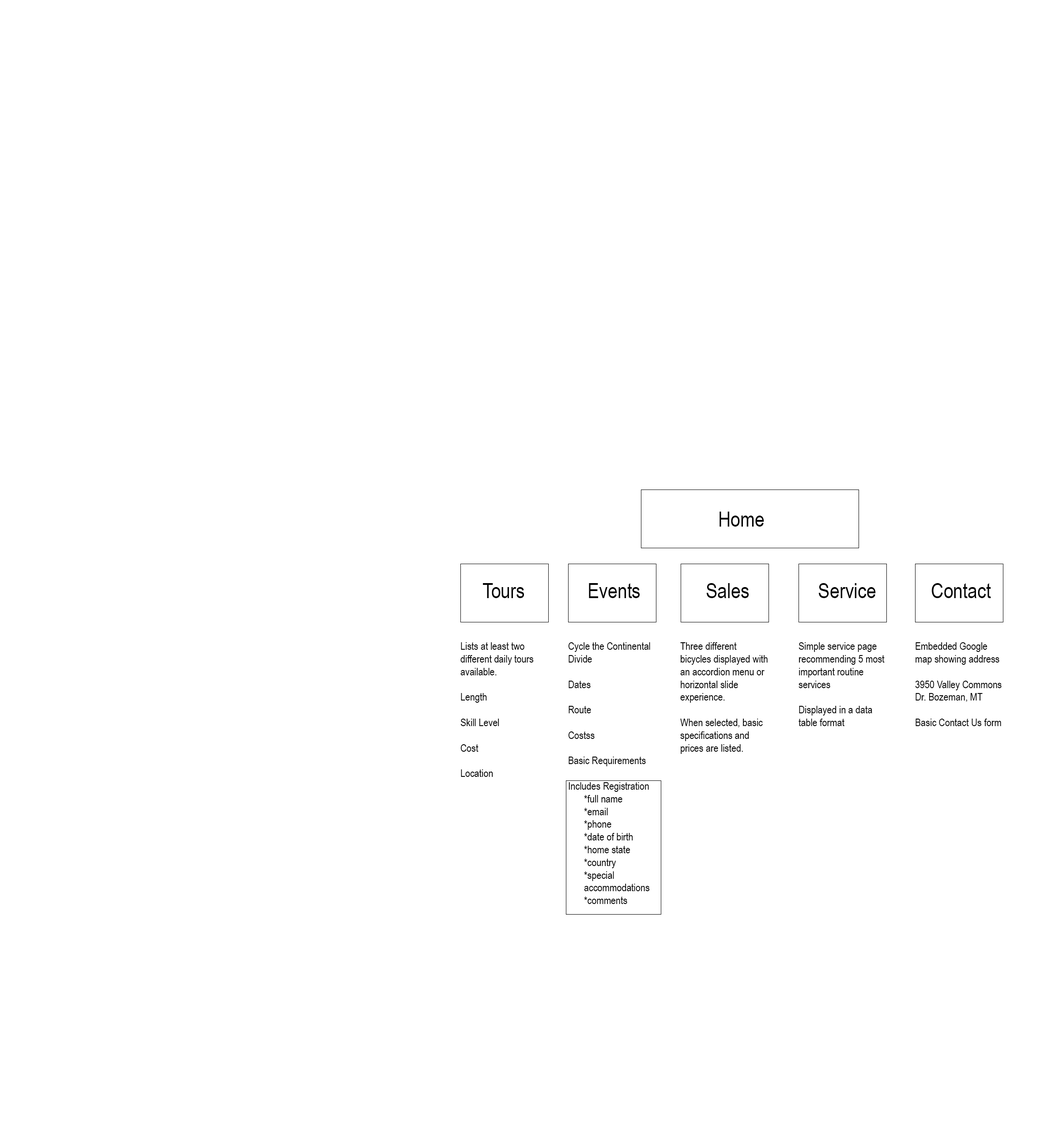
<style>
.page{position:relative;width:1055px;height:1130px;background:#ffffff}
.page>*{position:absolute;margin:0}
.t1{font:21.2px "ArialNarrow";color:#000000}
.t2{font:10.6px "ArialNarrow";color:#000000}
</style>
<div class="page">
<p class="t1" style="left:720px;top:512px;width:44px;height:15px">Home</p>
<p class="t1" style="left:483px;top:583px;width:41px;height:15px">Tours</p>
<p class="t1" style="left:589px;top:583px;width:51px;height:15px">Events</p>
<p class="t1" style="left:706px;top:583px;width:43px;height:15px">Sales</p>
<p class="t1" style="left:818px;top:583px;width:58px;height:15px">Service</p>
<p class="t1" style="left:931px;top:583px;width:60px;height:15px">Contact</p>
<p class="t2" style="left:460px;top:642px;width:74px;height:135px">Lists at least two different daily tours available.<br><br>Length<br><br>Skill Level<br><br>Cost<br><br>Location</p>
<p class="t2" style="left:568px;top:642px;width:82px;height:262px">Cycle the Continental Divide<br><br>Dates<br><br>Route<br><br>Costss<br><br>Basic Requirements<br><br>Includes Registration<br> *full name<br> *email<br> *phone<br> *date of birth<br> *home state<br> *country<br> *special<br> accommodations<br> *comments</p>
<p class="t2" style="left:680px;top:642px;width:88px;height:112px">Three different bicycles displayed with an accordion menu or horizontal slide experience.<br><br>When selected, basic specifications and prices are listed.</p>
<p class="t2" style="left:799px;top:642px;width:86px;height:84px">Simple service page recommending 5 most important routine services<br><br>Displayed in a data table format</p>
<p class="t2" style="left:915px;top:642px;width:87px;height:84px">Embedded Google map showing address<br><br>3950 Valley Commons Dr. Bozeman, MT<br><br>Basic Contact Us form</p>
</div>
